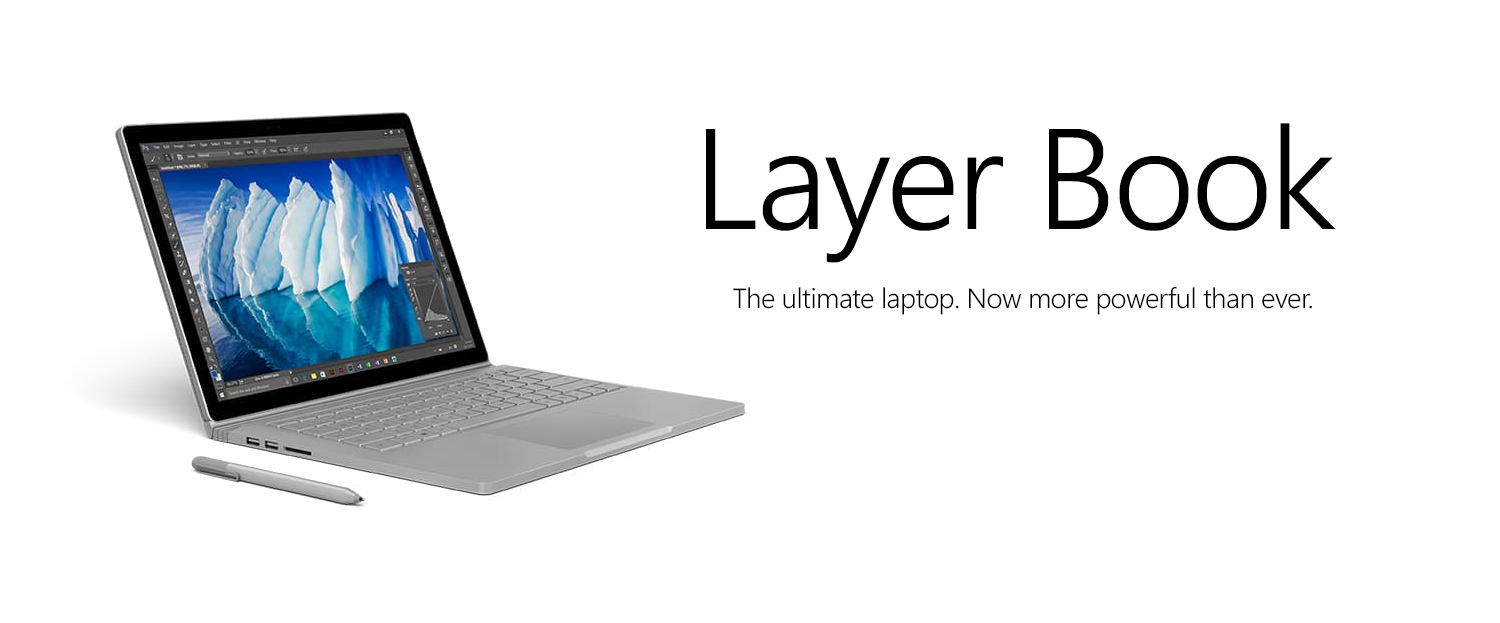
<style>
.page{position:relative;width:1500px;height:623px;background:#ffffff}
.page>*{position:absolute;margin:0}
.t1{font:142.8px "SegoeUI-Semilight";letter-spacing:-0.025em;color:#000000}
.t2{font:28.1px "SegoeUI-Semilight";letter-spacing:-0.025em;color:#000000}
</style>
<div class="page">
<p class="t1" style="left:706px;top:123px;width:630px;height:140px">Layer Book</p>
<p class="t2" style="left:733px;top:287px;width:579px;height:28px">The ultimate laptop. Now more powerful than ever.</p>
</div>
